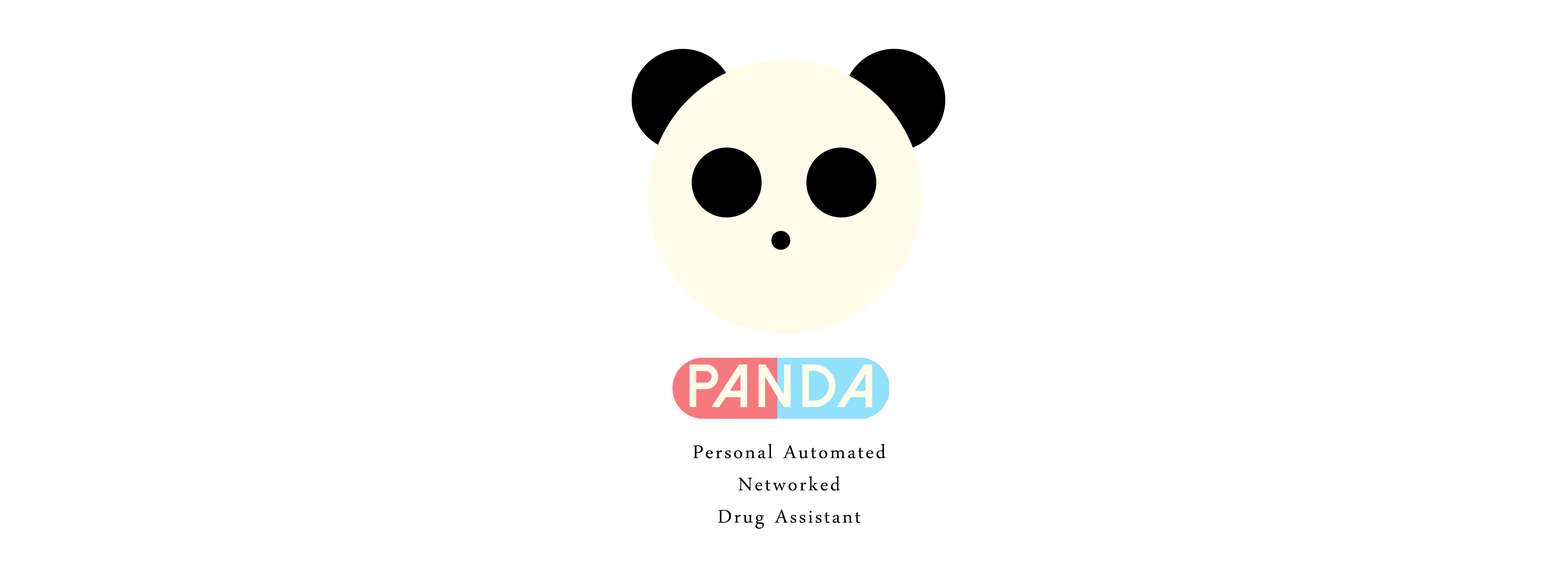
<style>
.page{position:relative;width:1568px;height:573px;background:#ffffff}
.page>*{position:absolute;margin:0}
.t1{font:60.9px "DolceVitaHeavy-Bold";letter-spacing:0.075em;color:#fffde9}
.t2{font:26.9px "DaunPenh";letter-spacing:0.075em;color:#000000}
</style>
<div class="page">
<p class="t1" style="left:689px;top:364px;width:183px;height:43px">PANDA</p>
<p class="t2" style="left:693px;top:443px;width:193px;height:86px;text-align:center">Personal Automated <br>Networked <br>Drug Assistant</p>
</div>
